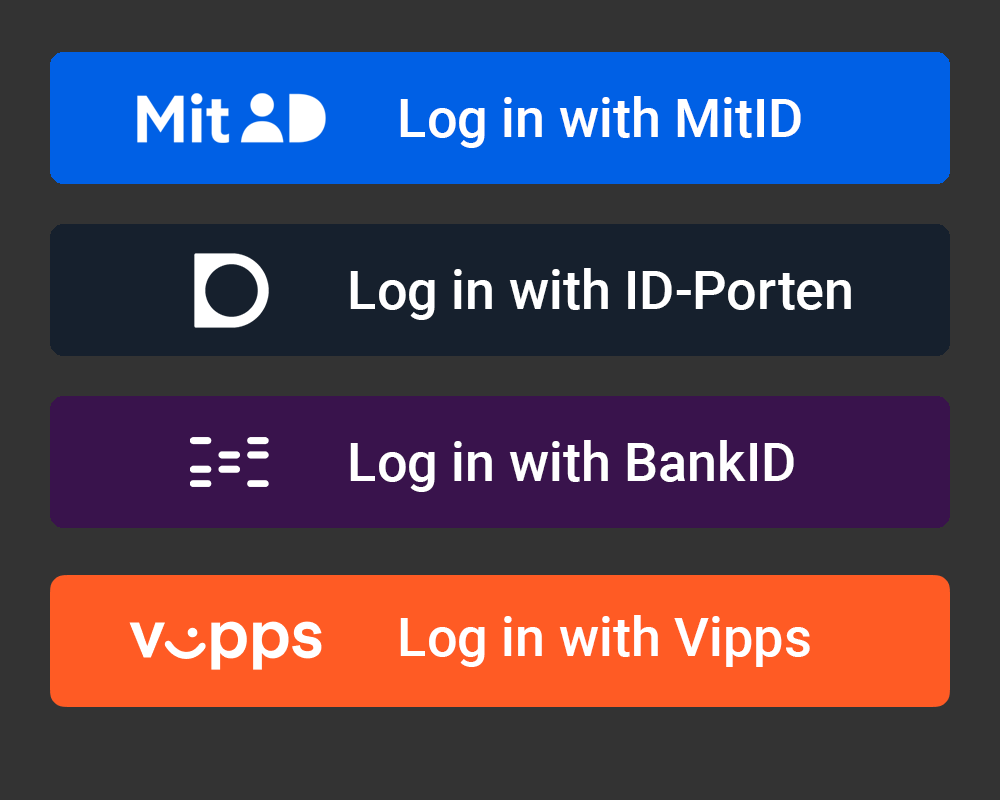
<style>
.page{position:relative;width:1000px;height:800px;background:#333333}
.page>*{position:absolute;margin:0}
.t1{font:54px "Roboto-Medium";color:#ffffff}
</style>
<div class="page">
<p class="t1" style="left:400px;top:96px;width:401px;height:52px">Log in with MitID</p>
<p class="t1" style="left:350px;top:268px;width:501px;height:52px">Log in with ID-Porten</p>
<p class="t1" style="left:350px;top:440px;width:444px;height:52px">Log in with BankID</p>
<p class="t1" style="left:400px;top:615px;width:410px;height:52px">Log in with Vipps</p>
</div>
